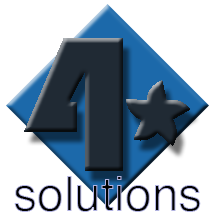
<style>
.page{position:relative;width:216px;height:216px;background:#ffffff}
.page>*{position:absolute;margin:0}
.t1{font:48px "Helvetica"}
</style>
<div class="page">
<p class="t1" style="left:14px;top:176px;width:187px;height:36px">solutions</p>
</div>
